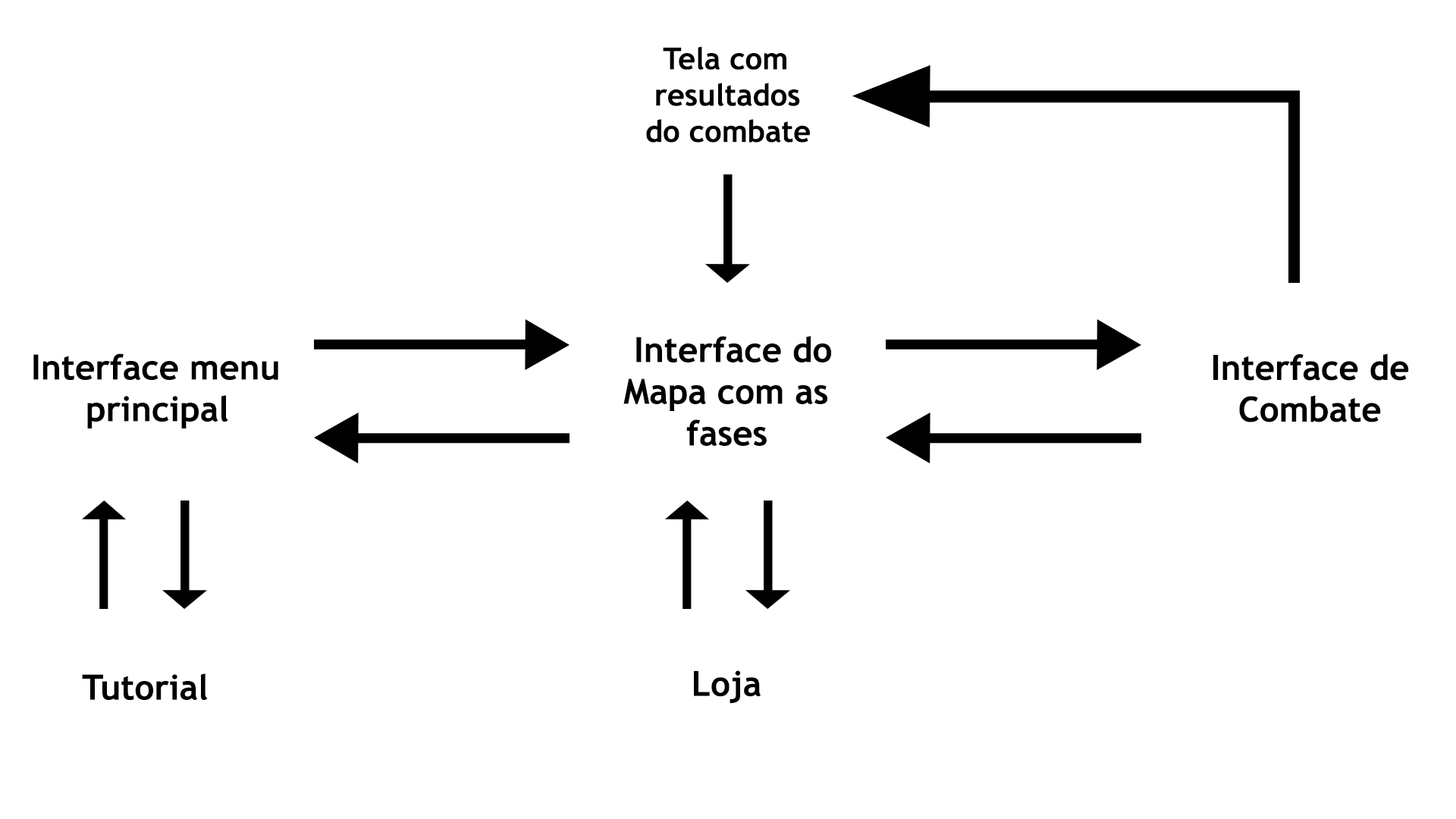
<style>
.page{position:relative;width:1456px;height:819px;background:#ffffff}
.page>*{position:absolute;margin:0}
.t1{font:30.3px "TrebuchetMS-Bold";color:#000000}
.t2{font:34.8px "TrebuchetMS-Bold";color:#000000}
</style>
<div class="page">
<p class="t1" style="left:646px;top:46px;width:164px;height:97px">Tela com <br> resultados <br>do combate</p>
<p class="t2" style="left:623px;top:336px;width:208px;height:110px">Interface do <br>Mapa com as <br>      fases</p>
<p class="t2" style="left:33px;top:353px;width:245px;height:75px">Interface menu <br>  principal</p>
<p class="t2" style="left:1213px;top:353px;width:196px;height:69px">Interface de <br> Combate</p>
<p class="t2" style="left:82px;top:673px;width:126px;height:27px">Tutorial</p>
<p class="t2" style="left:694px;top:670px;width:67px;height:34px">Loja</p>
</div>
